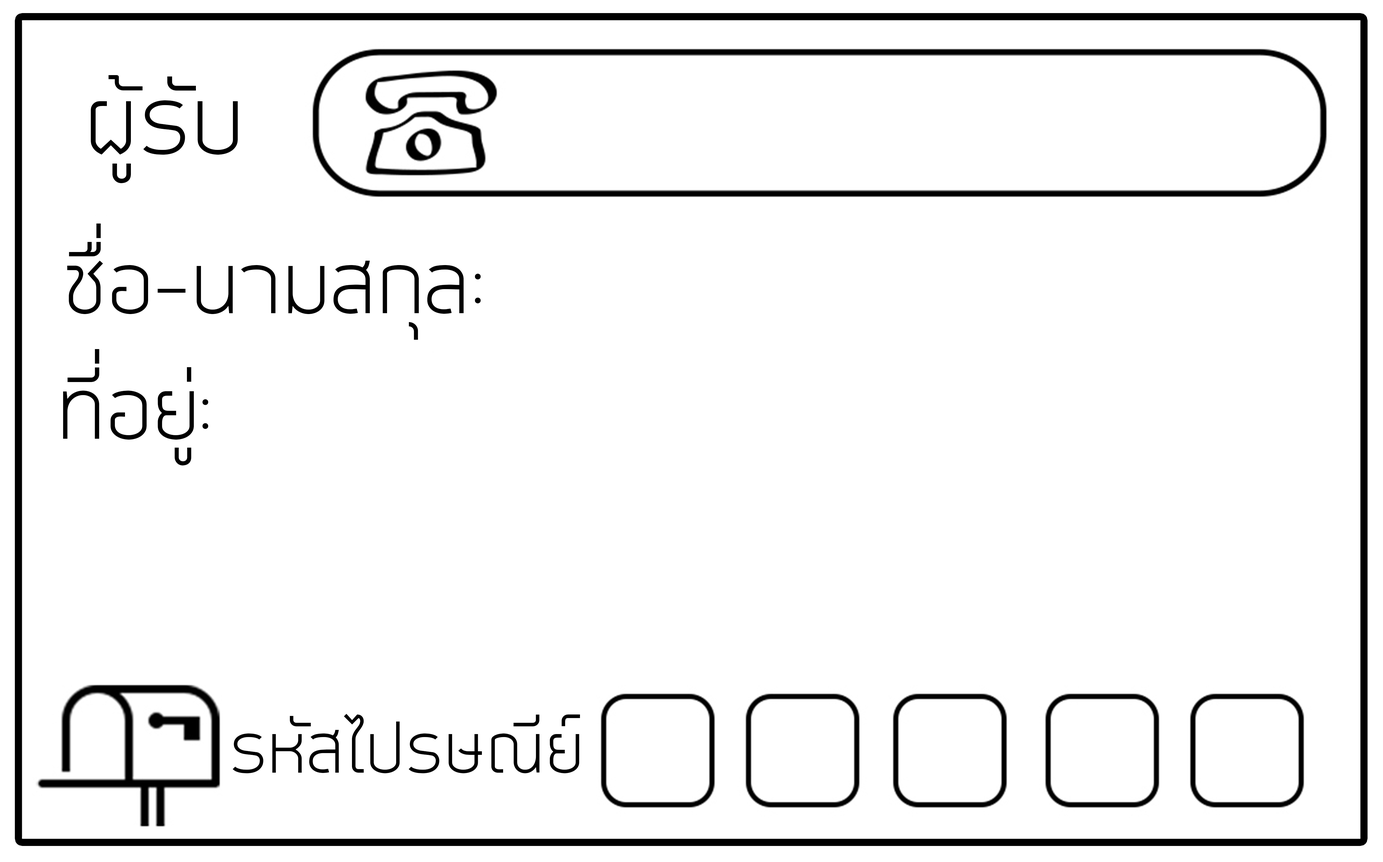
<style>
.page{position:relative;width:1383px;height:862px;background:#ffffff}
.page>*{position:absolute;margin:0}
.t1{font:89.1px "EkkamaiNew-Regular";color:#000000}
.t2{font:80.1px "EkkamaiNew-Regular";color:#000000}
.t3{font:65.3px "EkkamaiNew-Regular";color:#000000}
</style>
<div class="page">
<p class="t1" style="left:91px;top:75px;width:147px;height:108px">ผู้รับ</p>
<p class="t2" style="left:67px;top:224px;width:414px;height:116px">ชื่อ-นามสกุล:</p>
<p class="t2" style="left:63px;top:349px;width:145px;height:116px">ที่อยู่:</p>
<p class="t3" style="left:233px;top:714px;width:347px;height:59px">รหัสไปรษณีย์</p>
</div>
